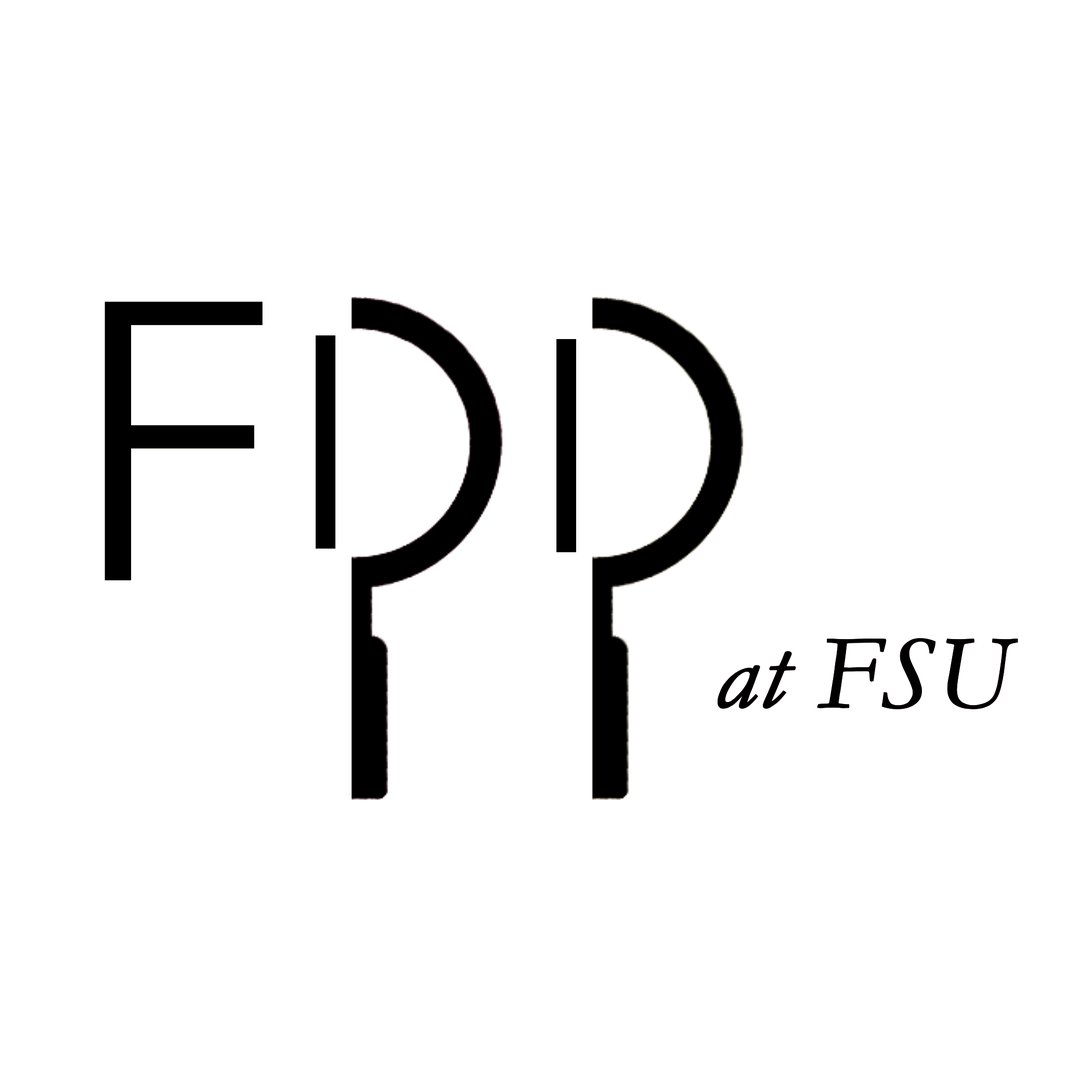
<style>
.page{position:relative;width:1092px;height:1092px;background:#ffffff}
.page>*{position:absolute;margin:0}
.t1{font:402.3px "AcuminConcept-SemiCondensedLight";color:#000000;font-weight:bold}
.t2{font:104.3px "Garamond-Italic";color:#000000;font-weight:bold}
</style>
<div class="page">
<p class="t1" style="left:105px;top:302px;width:158px;height:278px">F</p>
<p class="t1" style="left:105px;top:302px;width:158px;height:278px">F</p>
<p class="t2" style="left:717px;top:638px;width:301px;height:71px">at FSU</p>
<p class="t2" style="left:717px;top:638px;width:301px;height:71px">at FSU</p>
</div>
